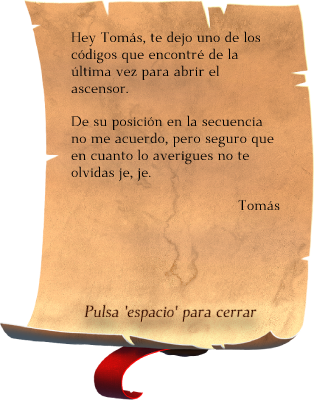
<style>
.page{position:relative;width:314px;height:400px;background:#ffffff}
.page>*{position:absolute;margin:0}
.t1{font:14px "DehutiAlt-Book";color:#000000}
.t2{font:16px "DehutiAlt-Italic";color:#350f01}
</style>
<div class="page">
<p class="t1" style="left:71px;top:31px;width:209px;height:180px">Hey Tomás, te dejo uno de los códigos que encontré de la última vez para abrir el ascensor. <br><br>De su posición en la secuencia no me acuerdo, pero seguro que en cuanto lo averigues no te olvidas je, je.<br><br>Tomás</p>
<p class="t2" style="left:84px;top:305px;width:173px;height:17px">Pulsa 'espacio' para cerrar</p>
</div>
